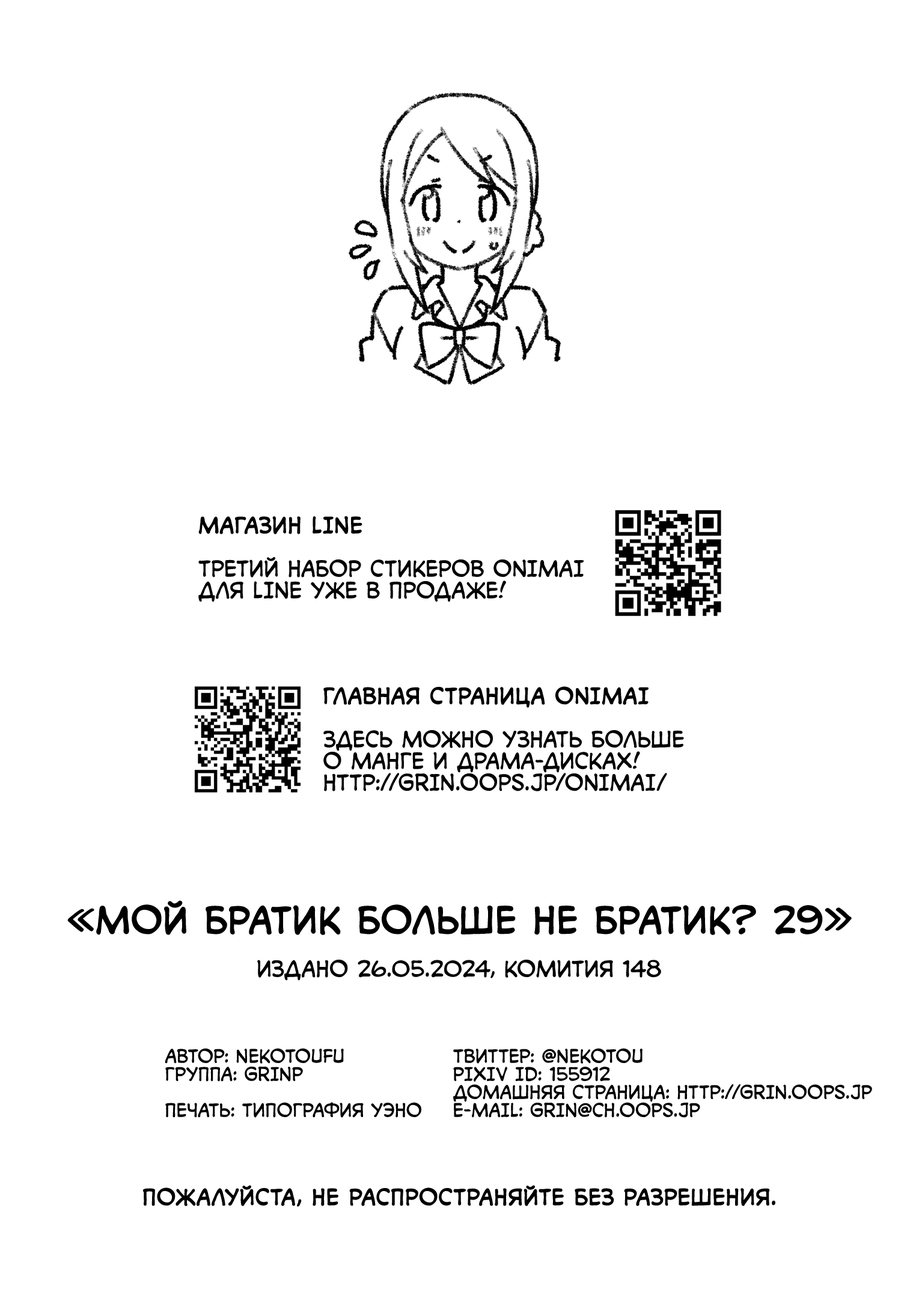
<style>
.page{position:relative;width:919px;height:1298px;background:#ffffff}
.page>*{position:absolute;margin:0}
.t1{font:21.6px "v_CCMonologous";color:#000000;text-transform:uppercase}
.t2{font:21.6px "v_CCMonologous";color:#000000;text-transform:uppercase;font-weight:bold}
.t3{font:36.1px "v_CCMonologous";color:#000000;text-transform:uppercase;font-weight:bold}
.t4{font:18px "v_CCMonologous";color:#000000;text-transform:uppercase}
</style>
<div class="page">
<p class="t1" style="left:198px;top:516px;width:386px;height:86px"><span class="t2">Магазин LINE<br><br></span>Третий набор стикеров Onimai<br>для LINE уже в продаже!</p>
<p class="t1" style="left:323px;top:686px;width:361px;height:105px"><span class="t2">Главная страница Onimai<br></span><br>Здесь можно узнать больше<br>о манге и драма-дисках!<br>http://grin.oops.jp/onimai/</p>
<p class="t3" style="left:67px;top:900px;width:784px;height:35px">«Мой братик больше не братик? 29»</p>
<p class="t1" style="left:257px;top:960px;width:404px;height:21px">Издано 26.05.2024, Комития 148</p>
<p class="t4" style="left:165px;top:1048px;width:256px;height:70px">Автор: Nekotoufu<br>Группа: GRINP<br><br>Печать: типография Уэно</p>
<p class="t4" style="left:453px;top:1048px;width:419px;height:70px">Твиттер: @nekotou<br>Pixiv ID: 155912<br>Домашняя страница: http://grin.oops.jp<br>E-mail: grin@ch.oops.jp</p>
<p class="t2" style="left:143px;top:1185px;width:632px;height:22px">Пожалуйста, не распространяйте без разрешения.</p>
</div>
